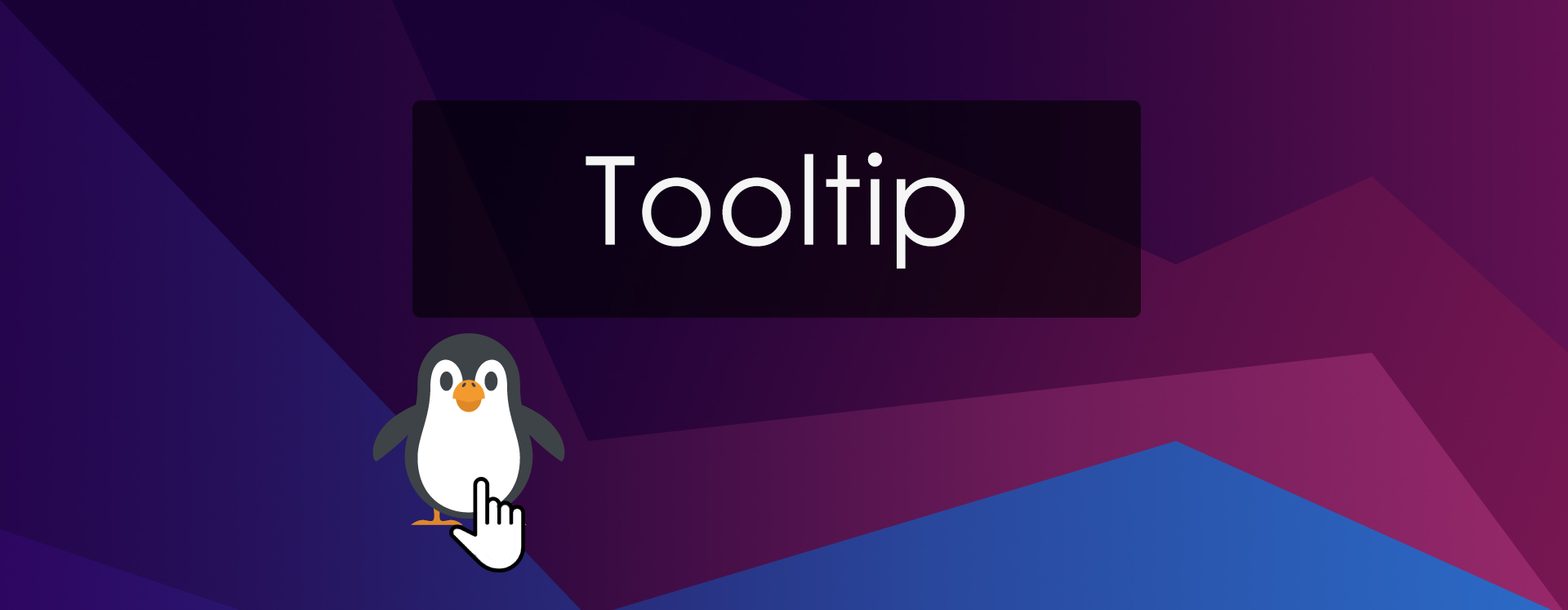
<style>
.page{position:relative;width:1568px;height:610px}
.page>*{position:absolute;margin:0}
.t1{font:122.5px "CenturyGothic";color:#f5f5f5}
</style>
<div class="page">
<p class="t1" style="left:586px;top:152px;width:378px;height:117px">Tooltip</p>
</div>
